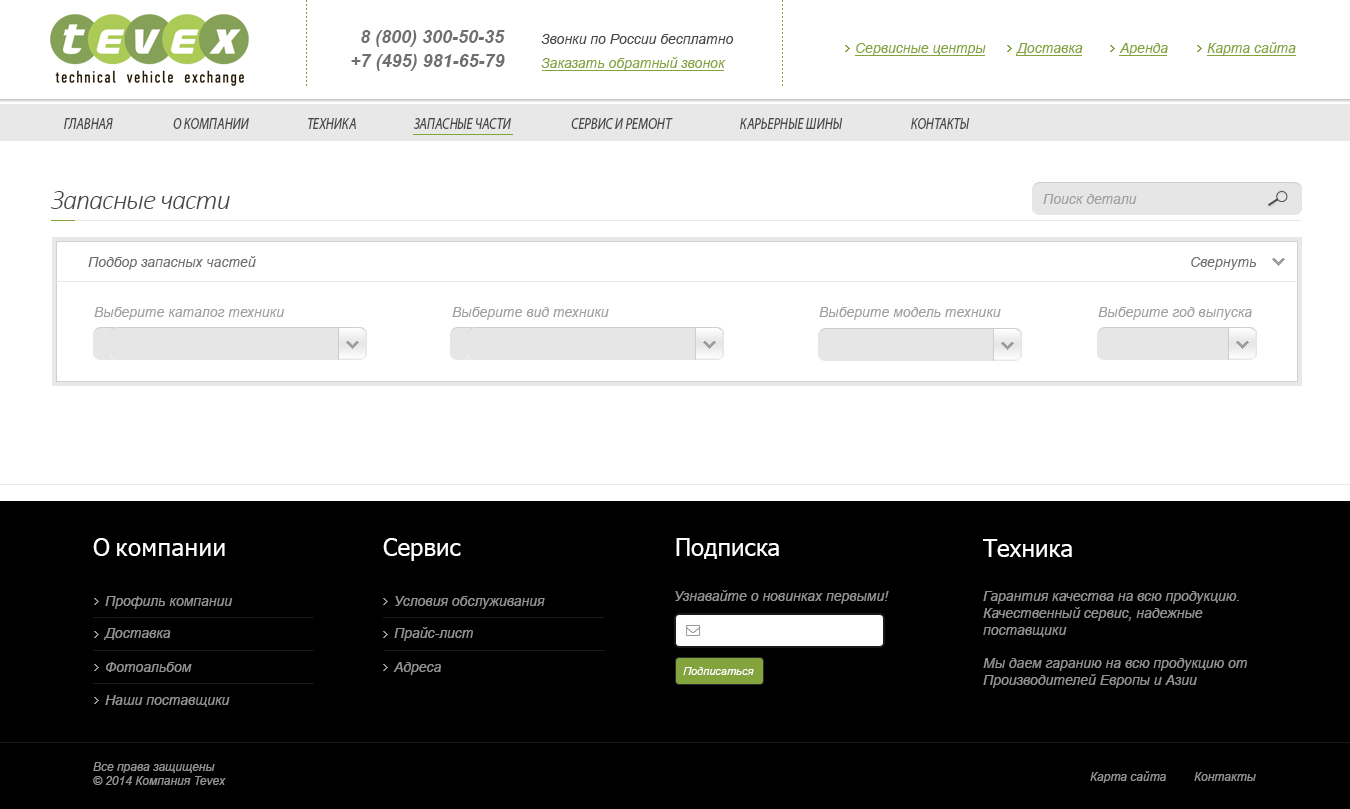
<style>
.page{position:relative;width:1350px;height:809px;background:#ffffff}
.page>*{position:absolute;margin:0}
.t1{font:18px "Arial-BoldItalicMT";color:#6f6f6f}
.t2{font:14px "Arial-ItalicMT";color:#484848}
.t3{font:14px "Arial-ItalicMT";color:#83a43c}
.t4{font:16.3px "MyriadPro-It";color:#484848;scale:0.79 1}
.t5{font:28px "Calibri-LightItalic";letter-spacing:-0.04em;color:#484848}
.t6{font:14px "Arial-ItalicMT";color:#a0a0a0}
.t7{font:14px "Arial-ItalicMT";color:#6f6f6f}
.t8{font:24px "Tahoma";letter-spacing:0.02em;color:#ffffff}
.t9{font:24px "Tahoma";color:#ffffff}
.t10{font:14px "Arial-ItalicMT";color:#939393}
.t11{font:11px "Arial-ItalicMT";color:#ffffff}
.t12{font:12px "Arial-ItalicMT";color:#939393}
</style>
<div class="page">
<p class="t1" style="left:361px;top:30px;width:144px;height:17px">8 (800) 300-50-35</p>
<p class="t2" style="left:541px;top:34px;width:193px;height:10px">Звонки по России бесплатно</p>
<p class="t1" style="left:351px;top:54px;width:154px;height:17px">+7 (495) 981-65-79</p>
<p class="t3" style="left:856px;top:43px;width:130px;height:13px">Сервисные центры</p>
<p class="t3" style="left:1016px;top:43px;width:67px;height:12px">Доставка</p>
<p class="t3" style="left:1119px;top:43px;width:49px;height:13px">Аренда</p>
<p class="t3" style="left:1207px;top:42px;width:89px;height:14px">Карта сайта</p>
<p class="t3" style="left:541px;top:57px;width:185px;height:14px">Заказать обратный звонок</p>
<p class="t4" style="left:64px;top:118px;width:49px;height:11px">ГЛАВНАЯ</p>
<p class="t4" style="left:173px;top:118px;width:76px;height:11px">О КОМПАНИИ</p>
<p class="t4" style="left:308px;top:118px;width:48px;height:11px">ТЕХНИКА</p>
<p class="t4" style="left:413px;top:118px;width:98px;height:11px">ЗАПАСНЫЕ ЧАСТИ</p>
<p class="t4" style="left:571px;top:118px;width:102px;height:11px">СЕРВИС И РЕМОНТ</p>
<p class="t4" style="left:740px;top:118px;width:103px;height:11px">КАРЬЕРНЫЕ ШИНЫ</p>
<p class="t4" style="left:911px;top:118px;width:59px;height:11px">КОНТАКТЫ</p>
<p class="t5" style="left:51px;top:191px;width:179px;height:18px">Запасные части</p>
<p class="t6" style="left:1043px;top:194px;width:94px;height:10px">Поиск детали</p>
<p class="t7" style="left:88px;top:256px;width:168px;height:14px">Подбор запасных частей</p>
<p class="t7" style="left:1191px;top:257px;width:65px;height:13px">Свернуть</p>
<p class="t6" style="left:94px;top:307px;width:191px;height:13px">Выберите каталог техники</p>
<p class="t6" style="left:452px;top:307px;width:157px;height:13px">Выберите вид техники</p>
<p class="t6" style="left:819px;top:307px;width:182px;height:13px">Выберите модель техники</p>
<p class="t6" style="left:1098px;top:307px;width:154px;height:13px">Выберите год выпуска</p>
<p class="t8" style="left:93px;top:538px;width:132px;height:18px"><span class="t9">О </span>компании</p>
<p class="t9" style="left:383px;top:538px;width:78px;height:23px">Сервис</p>
<p class="t9" style="left:676px;top:538px;width:103px;height:21px">Подписка</p>
<p class="t9" style="left:983px;top:539px;width:89px;height:18px">Техника</p>
<p class="t10" style="left:675px;top:590px;width:214px;height:14px">Узнавайте о новинках первыми!</p>
<p class="t10" style="left:983px;top:591px;width:264px;height:97px">Гарантия качества на всю продукцию.<br>Качественный сервис, надежные <br>поставщики<br><br>Мы даем гаранию на всю продукцию от <br>Производителей Европы и Азии</p>
<p class="t10" style="left:105px;top:596px;width:128px;height:13px">Профиль компании</p>
<p class="t10" style="left:395px;top:596px;width:150px;height:13px">Условия обслуживания</p>
<p class="t10" style="left:104px;top:628px;width:67px;height:12px">Доставка</p>
<p class="t10" style="left:394px;top:627px;width:79px;height:14px">Прайс-лист</p>
<p class="t10" style="left:106px;top:662px;width:86px;height:10px">Фотоальбом</p>
<p class="t10" style="left:393px;top:662px;width:48px;height:13px">Адреса</p>
<p class="t11" style="left:683px;top:667px;width:71px;height:8px">Подписаться</p>
<p class="t10" style="left:105px;top:695px;width:125px;height:12px">Наши поставщики</p>
<p class="t12" style="left:93px;top:762px;width:133px;height:23px">Все права защищены<br>© 2014 Компания Tevex</p>
<p class="t12" style="left:1090px;top:771px;width:76px;height:12px">Карта сайта</p>
<p class="t12" style="left:1194px;top:772px;width:62px;height:9px">Контакты</p>
</div>
